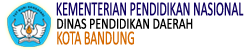
<style>
.page{position:relative;width:250px;height:50px;background:#ffffff}
.page>*{position:absolute;margin:0}
.t1{font:20px "Calibri";color:#0e0060;scale:0.59 1}
.t2{font:15.4px "Calibri";color:#000000;scale:0.77 1}
.t3{font:20px "Calibri";color:#d56900;scale:0.59 1}
</style>
<div class="page">
<p class="t1" style="left:56px;top:2px;width:188px;height:14px">KEMENTERIAN PENDIDIKAN NASIONAL</p>
<p class="t2" style="left:57px;top:18px;width:136px;height:11px">DINAS PENDIDIKAN DAERAH</p>
<p class="t3" style="left:57px;top:31px;width:77px;height:14px">KOTA BANDUNG</p>
</div>
